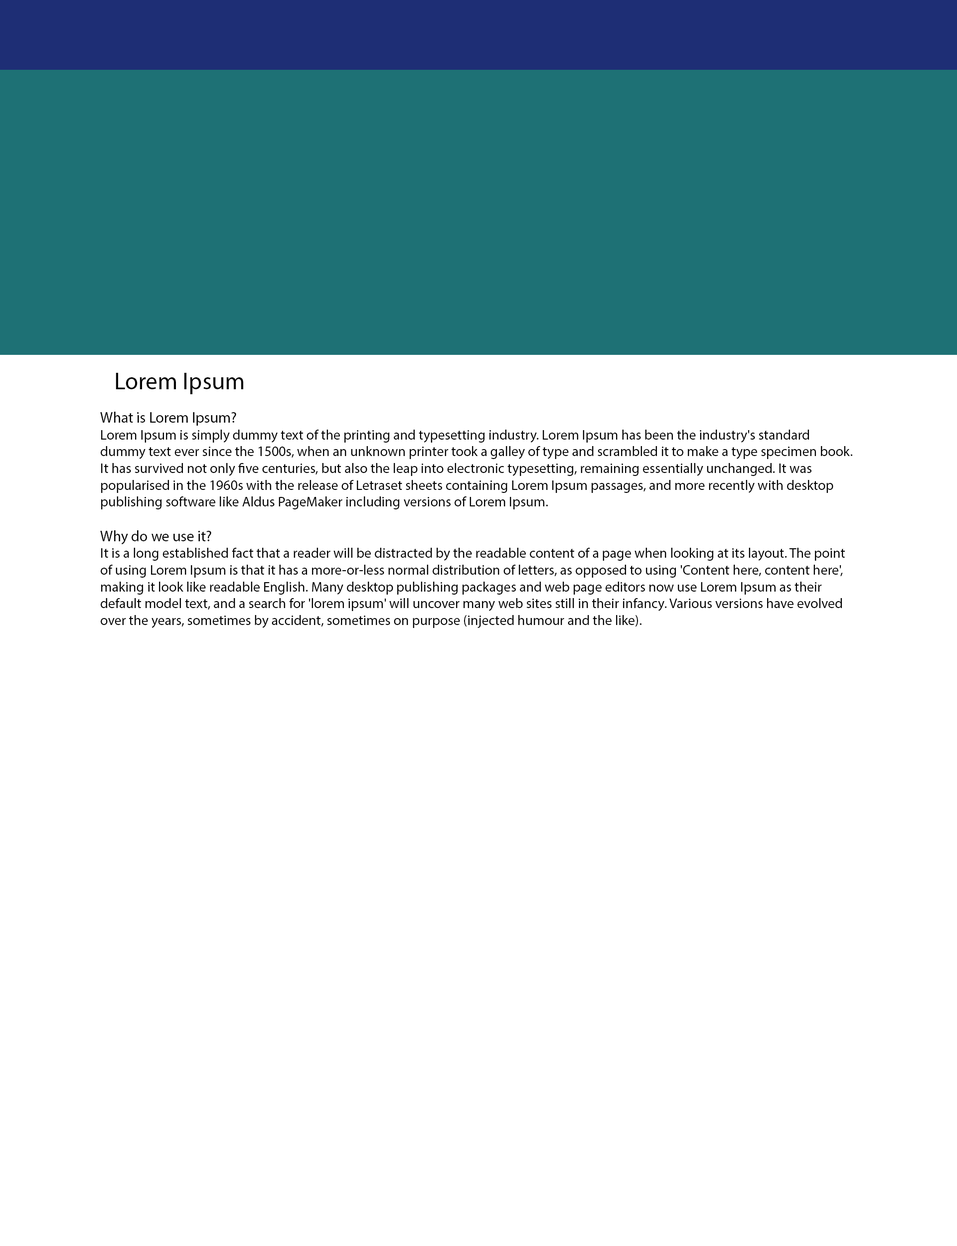
<style>
.page{position:relative;width:957px;height:1246px;background:#ffffff}
.page>*{position:absolute;margin:0}
.t1{font:23.9px "MyriadPro-Regular";color:#030303}
.t2{font:14px "MyriadPro-Regular";color:#030303}
.t3{font:15px "MyriadPro-Regular";color:#030303}
</style>
<div class="page">
<p class="t1" style="left:116px;top:373px;width:127px;height:21px">Lorem Ipsum</p>
<p class="t2" style="left:100px;top:412px;width:752px;height:216px"><span class="t3">What is Lorem Ipsum?<br></span>Lorem Ipsum is simply dummy text of the printing and typesetting industry. Lorem Ipsum has been the industry's standard dummy text ever since the 1500s, when an unknown printer took a galley of type and scrambled it to make a type specimen book. It has survived not only five centuries, but also the leap into electronic typesetting, remaining essentially unchanged. It was popularised in the 1960s with the release of Letraset sheets containing Lorem Ipsum passages, and more recently with desktop publishing software like Aldus PageMaker including versions of Lorem Ipsum.<br><br><span class="t3">Why do we use it?<br></span>It is a long established fact that a reader will be distracted by the readable content of a page when looking at its layout. The point of using Lorem Ipsum is that it has a more-or-less normal distribution of letters, as opposed to using 'Content here, content here', making it look like readable English. Many desktop publishing packages and web page editors now use Lorem Ipsum as their default model text, and a search for 'lorem ipsum' will uncover many web sites still in their infancy. Various versions have evolved over the years, sometimes by accident, sometimes on purpose (injected humour and the like).</p>
</div>
